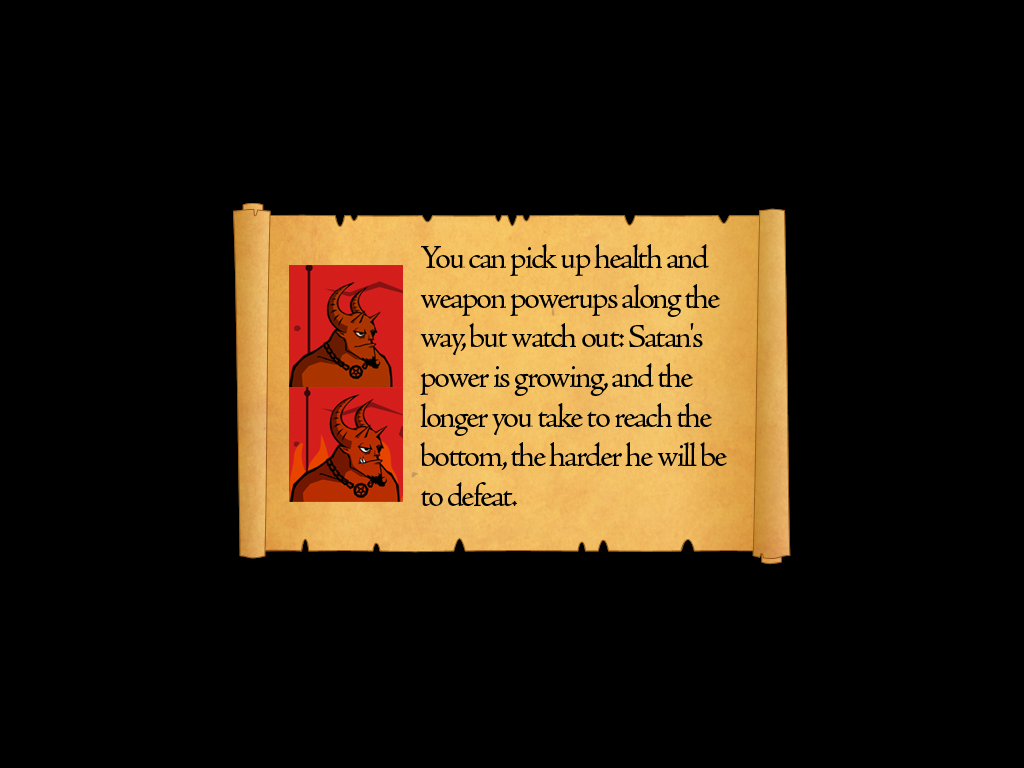
<style>
.page{position:relative;width:1024px;height:768px;background:#000000}
.page>*{position:absolute;margin:0}
.t1{font:33px "AJensonPro-Regular";letter-spacing:-0.06em;color:#000000}
</style>
<div class="page">
<p class="t1" style="left:420px;top:244px;width:307px;height:262px">You can pick up health and weapon powerups along the way, but watch out: Satan's power is growing, and the longer you take to reach the bottom, the harder he will be to defeat.</p>
</div>
